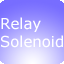
<style>
.page{position:relative;width:64px;height:64px}
.page>*{position:absolute;margin:0}
.t1{font:14.9px "Verdana";color:#ffffff}
</style>
<div class="page">
<p class="t1" style="left:1px;top:17px;width:62px;height:31px">Relay<br>Solenoid</p>
</div>
